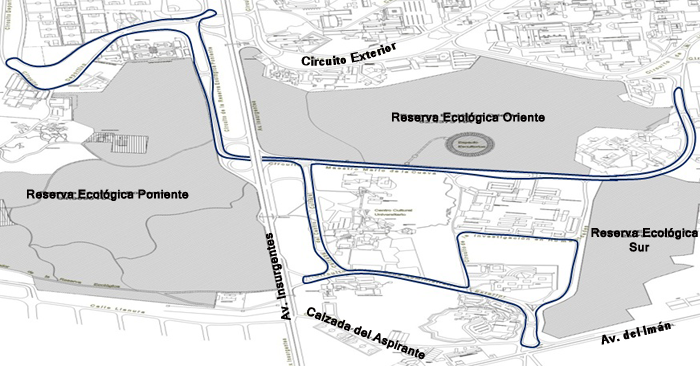
<style>
.page{position:relative;width:700px;height:366px;background:#ffffff}
.page>*{position:absolute;margin:0}
.t1{font:12px "Kartika-Bold";color:#030000}
</style>
<div class="page">
<p class="t1" style="left:301px;top:42px;width:95px;height:24px;rotate:-10deg">Circuito Exterior</p>
<p class="t1" style="left:392px;top:112px;width:153px;height:12px">Reserva Ecológica Oriente</p>
<p class="t1" style="left:27px;top:189px;width:162px;height:12px">Reserva Ecológica Poniente</p>
<p class="t1" style="left:266px;top:233px;width:25px;height:87px;rotate:-102deg">Av. Insurgentes</p>
<p class="t1" style="left:591px;top:228px;width:107px;height:24px">Reserva Ecológica<br>           Sur</p>
<p class="t1" style="left:307px;top:307px;width:118px;height:53px;rotate:21deg">Calzada del Aspirante</p>
<p class="t1" style="left:601px;top:321px;width:70px;height:24px;rotate:-13deg">Av. del Imán</p>
</div>
